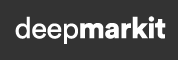
<style>
.page{position:relative;width:178px;height:60px;background:#333333}
.page>*{position:absolute;margin:0}
.t1{font:29.5px "CircularStd-Black";letter-spacing:-0.025em;color:#ffffff}
.t2{font:29.5px "CircularStd-Book";letter-spacing:-0.025em;color:#ffffff}
</style>
<div class="page">
<p class="t1" style="left:15px;top:16px;width:151px;height:28px"><span class="t2">deep</span>markit</p>
</div>
